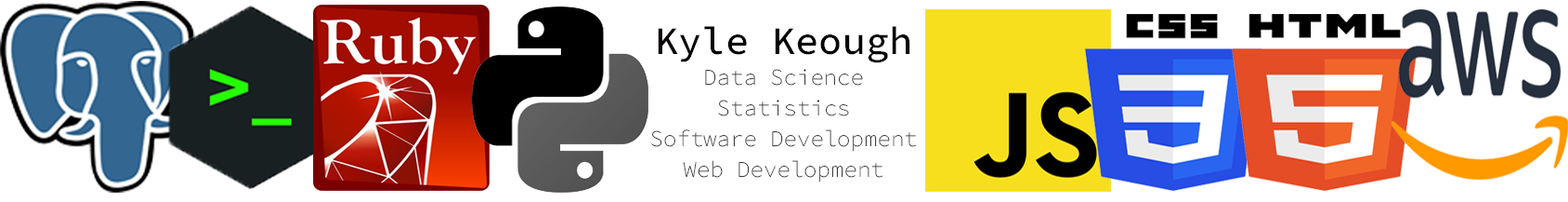
<style>
.page{position:relative;width:1568px;height:202px;background:#ffffff}
.page>*{position:absolute;margin:0}
.t1{font:22.3px/30.7px "SourceCodePro-ExtraLight";color:#050101}
.t2{font:39px/30.7px "SourceCodePro-Medium";color:#050101}
</style>
<div class="page">
<p class="t1" style="left:651px;top:26px;width:265px;height:156px;text-align:center"><span class="t2">Kyle Keough<br></span>Data Science<br>Statistics<br>Software Development<br>Web Development</p>
</div>
